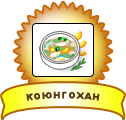
<style>
.page{position:relative;width:126px;height:120px;background:#ffffff}
.page>*{position:absolute;margin:0}
.t1{font:9px "Arial-Black";letter-spacing:0.075em;color:#5b3714;text-transform:uppercase}
</style>
<div class="page">
<p class="t1" style="left:26px;top:91px;width:74px;height:10px">Коюнгохан</p>
</div>
